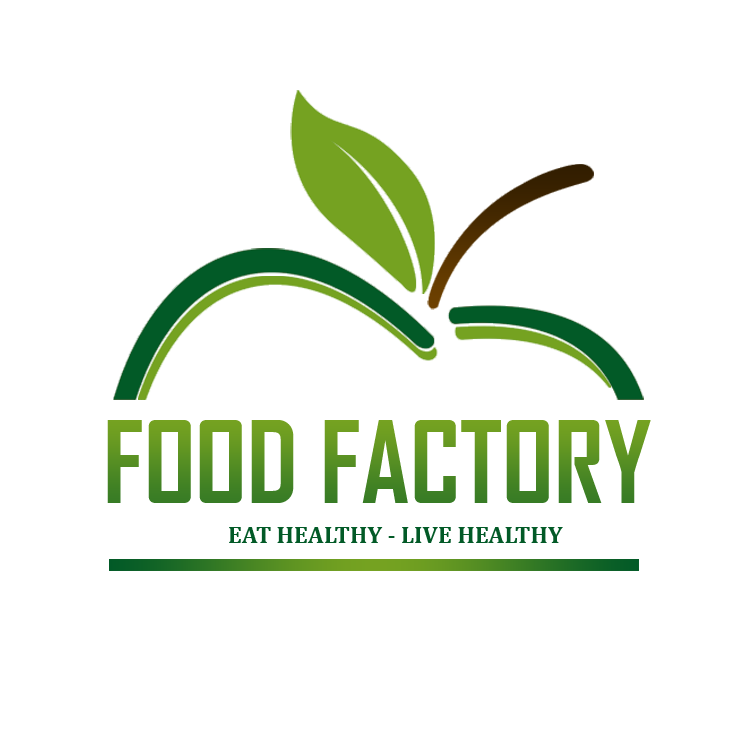
<style>
.page{position:relative;width:750px;height:750px;background:#ffffff}
.page>*{position:absolute;margin:0}
.t1{font:108.1px "AgencyFB-Bold"}
.t2{font:24.2px "Cambria-Bold";color:#025a27}
</style>
<div class="page">
<p class="t1" style="left:107px;top:420px;width:544px;height:83px">FOOD FACTORY</p>
<p class="t2" style="left:229px;top:527px;width:334px;height:16px">EAT HEALTHY - LIVE HEALTHY</p>
</div>
